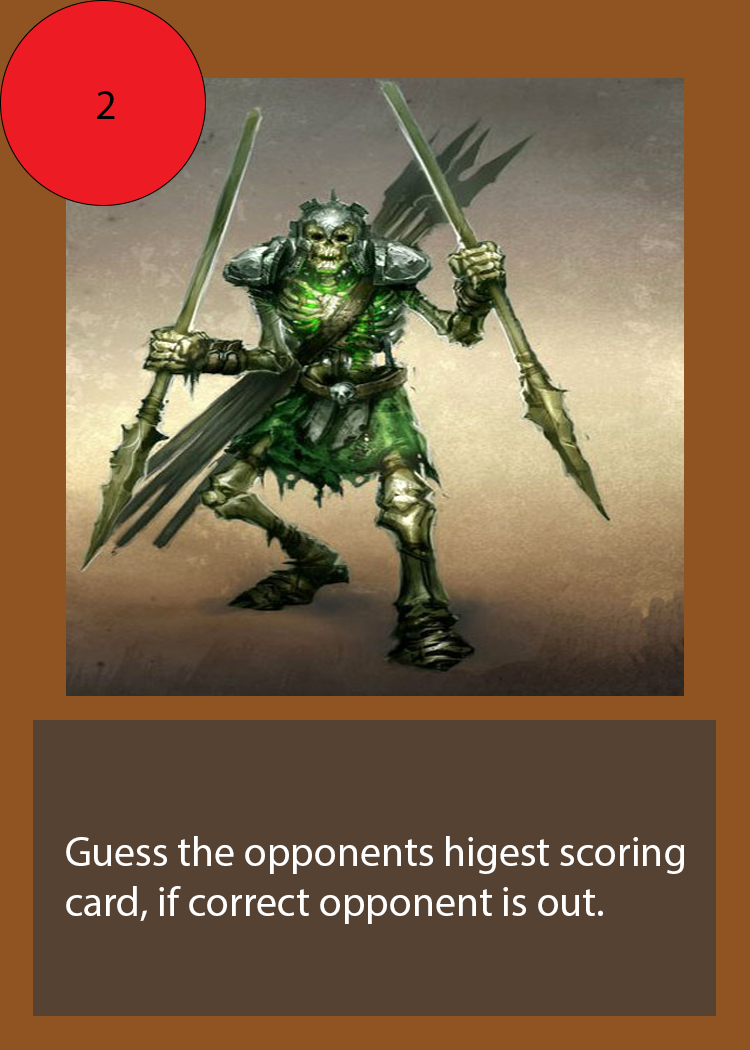
<style>
.page{position:relative;width:750px;height:1050px;background:#905322}
.page>*{position:absolute;margin:0}
.t1{font:41.7px "MyriadPro-Regular";color:#000000}
.t2{font:41.7px "MyriadPro-Regular";color:#ffffff}
</style>
<div class="page">
<p class="t1" style="left:97px;top:91px;width:18px;height:28px">2</p>
<p class="t2" style="left:66px;top:836px;width:619px;height:88px">Guess the opponents higest scoring<br>card, if correct opponent is out.</p>
</div>
